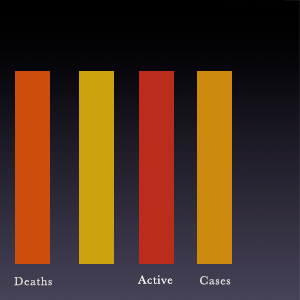
<style>
.page{position:relative;width:300px;height:300px}
.page>*{position:absolute;margin:0}
.t1{font:12px "Baskerville";letter-spacing:0.07em;color:#ded9d7}
.t2{font:12px "Baskerville";letter-spacing:0.07em;color:#fcf8f8}
.t3{font:12px "Baskerville";letter-spacing:0.07em;color:#dfdcdb}
</style>
<div class="page">
<p class="t1" style="left:14px;top:276px;width:38px;height:10px">Deaths</p>
<p class="t2" style="left:138px;top:275px;width:35px;height:9px">Active</p>
<p class="t3" style="left:200px;top:276px;width:31px;height:9px">Cases</p>
</div>
